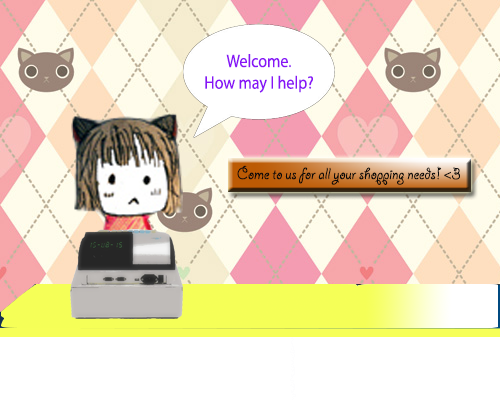
<style>
.page{position:relative;width:500px;height:400px;background:#ffffff}
.page>*{position:absolute;margin:0}
.t1{font:18px "MyriadPro-Regular";color:#8914f6;scale:0.89 1}
.t2{font:18.1px "GiddyupStd";color:#0a0a0a}
</style>
<div class="page">
<p class="t1" style="left:205px;top:54px;width:108px;height:39px;text-align:center">Welcome.<br>How may I help?</p>
<p class="t2" style="left:237px;top:165px;width:223px;height:20px">Come to us for all your shopping needs! &lt;3</p>
</div>
